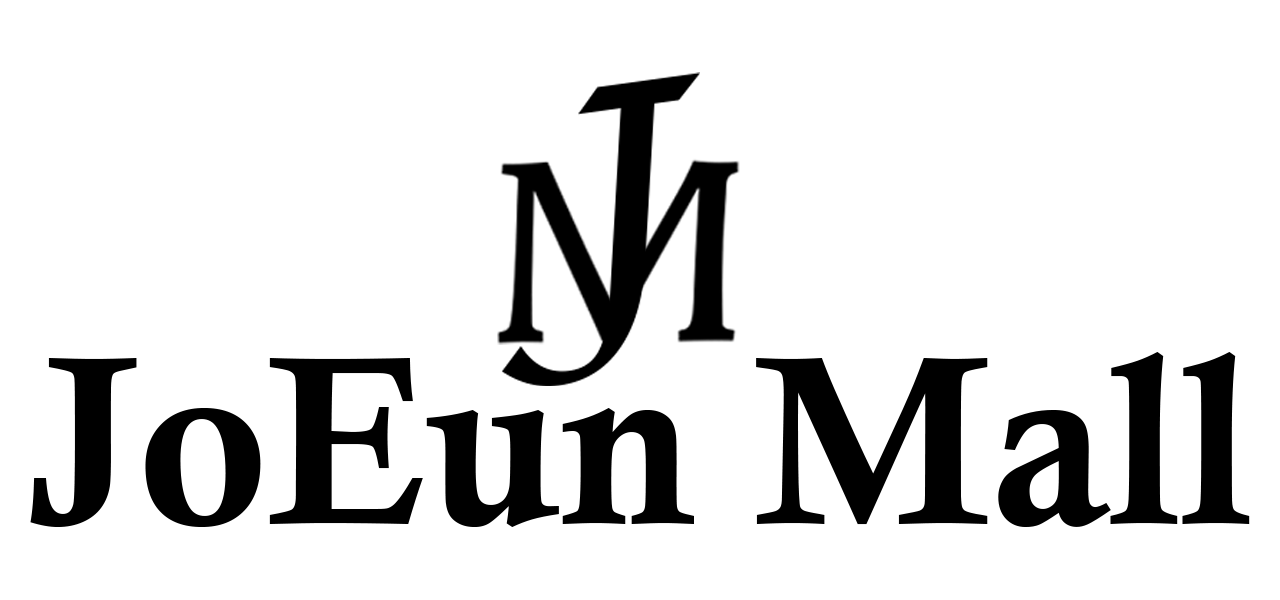
<style>
.page{position:relative;width:1280px;height:600px;background:#ffffff}
.page>*{position:absolute;margin:0}
.t1{font:239.1px "CalisMTBol";color:#000000}
</style>
<div class="page">
<p class="t1" style="left:30px;top:352px;width:1220px;height:175px">JoEun Mall</p>
</div>
